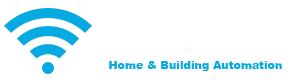
<style>
.page{position:relative;width:300px;height:80px;background:#ffffff}
.page>*{position:absolute;margin:0}
.t1{font:11px "Arial-Black";color:#06aae0}
</style>
<div class="page">
<p class="t1" style="left:109px;top:61px;width:173px;height:10px">Home &amp; Building Automation</p>
</div>
